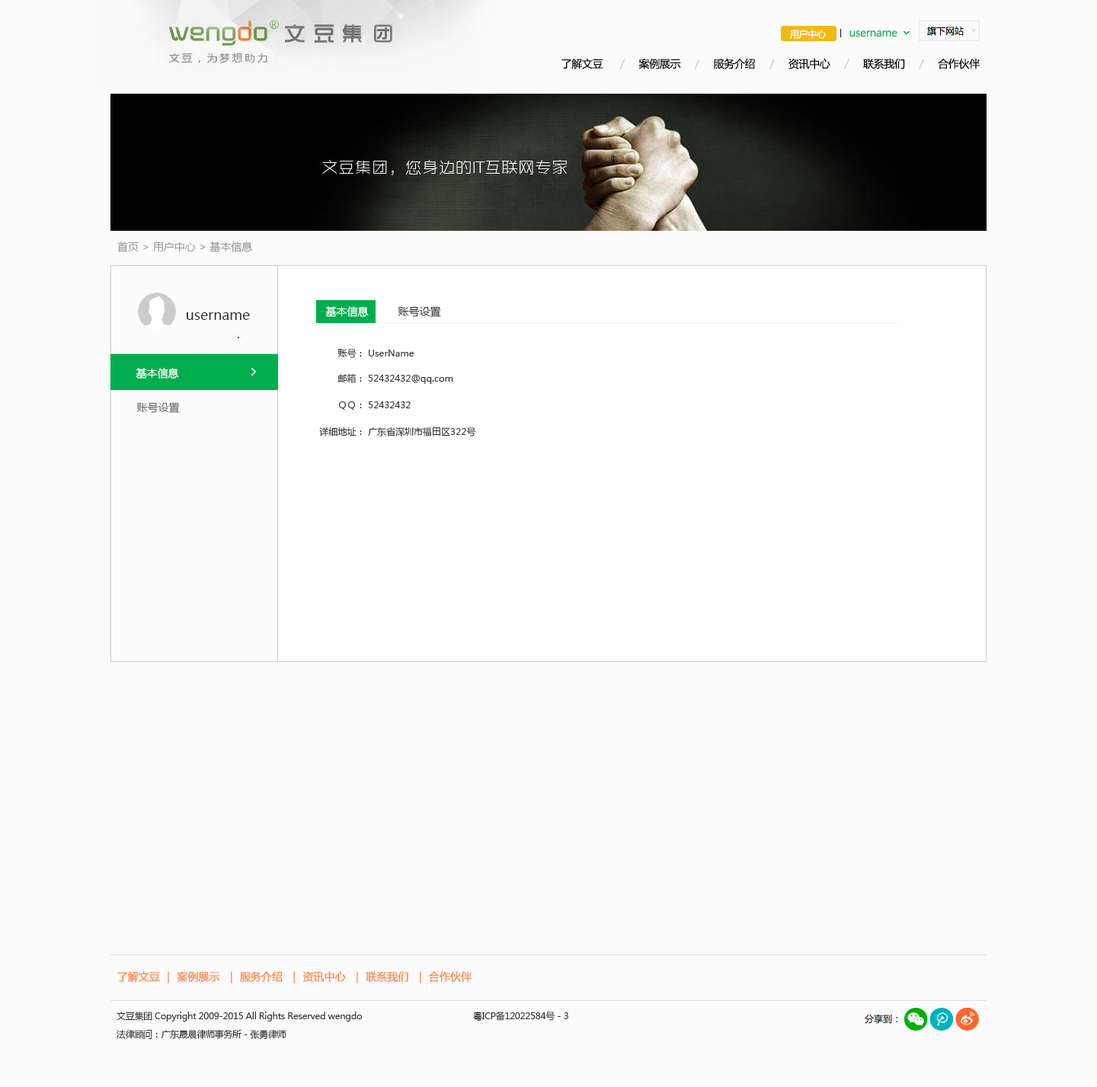
<style>
.page{position:relative;width:1097px;height:1087px;background:#fbfbfb}
.page>*{position:absolute;margin:0}
.t1{font:9.1px "MicrosoftYaHei";letter-spacing:-0.025em;color:#fefefe}
.t2{font:10.7px "MicrosoftYaHei";letter-spacing:-0.025em;color:#23b35c}
.t3{font:10.7px "MicrosoftYaHei";letter-spacing:-0.025em;color:#010101}
.t4{font:10.7px "MicrosoftYaHei";letter-spacing:-0.025em;color:#cccccc}
.t5{font:10.7px "MicrosoftYaHei";color:#999999}
.t6{font:13.7px "MicrosoftYaHei";color:#333333}
.t7{font:10.7px "MicrosoftYaHei";color:#ffffff}
.t8{font:10.7px "MicrosoftYaHei";color:#333333}
.t9{font:9.1px "MicrosoftYaHei";color:#333333}
.t10{font:10.7px "MicrosoftYaHei";color:#666666}
.t11{font:10.7px "MicrosoftYaHei";letter-spacing:-0.025em;color:#ff8f54;font-weight:bold}
.t12{font:9.1px/18.3px "MicrosoftYaHei";letter-spacing:-0.025em;color:#333333}
</style>
<div class="page">
<p class="t1" style="left:790px;top:29px;width:37px;height:10px">用户中心</p>
<p class="t2" style="left:849px;top:30px;width:48px;height:7px">username</p>
<p class="t3" style="left:561px;top:58px;width:419px;height:11px">了解文豆      <span class="t4">/     </span>案例展示     <span class="t4">/     </span>服务介绍     <span class="t4">/     </span>资讯中心     <span class="t4">/     </span>联系我们     <span class="t4">/     </span>合作伙伴</p>
<p class="t5" style="left:117px;top:241px;width:136px;height:11px">首页 &gt; 用户中心 &gt; 基本信息</p>
<p class="t6" style="left:186px;top:312px;width:64px;height:8px">username</p>
<p class="t7" style="left:325px;top:306px;width:44px;height:11px">基本信息</p>
<p class="t8" style="left:398px;top:306px;width:43px;height:11px">账号设置</p>
<p class="t9" style="left:337px;top:349px;width:77px;height:9px">账号： UserName</p>
<p class="t7" style="left:136px;top:368px;width:43px;height:11px">基本信息</p>
<p class="t9" style="left:338px;top:373px;width:115px;height:11px">邮箱： 52432432@qq.com</p>
<p class="t9" style="left:338px;top:401px;width:73px;height:9px">ＱＱ： 52432432</p>
<p class="t10" style="left:136px;top:402px;width:44px;height:11px">账号设置</p>
<p class="t9" style="left:319px;top:427px;width:157px;height:9px">详细地址： 广东省深圳市福田区322号</p>
<p class="t11" style="left:117px;top:971px;width:355px;height:12px">了解文豆 ｜ 案例展示  ｜ 服务介绍  ｜ 资讯中心  ｜ 联系我们  ｜ 合作伙伴</p>
<p class="t12" style="left:117px;top:1011px;width:451px;height:28px">文豆集团 Copyright 2009-2015 All Rights Reserved wengdo     粤ICP备12022584号－3<br>法律顾问：广东晟晨律师事务所－张勇律师</p>
</div>
